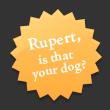
<style>
.page{position:relative;width:110px;height:110px;background:#333333}
.page>*{position:absolute;margin:0}
.t1{font:17px "AJensonPro-Bold";color:#ffffff}
.t2{font:14px/12px "AJensonPro-Bold";color:#ffffff}
</style>
<div class="page">
<p class="t1" style="left:27px;top:33px;width:54px;height:18px;rotate:-11deg">Rupert,</p>
<p class="t2" style="left:32px;top:51px;width:54px;height:31px;text-align:center;rotate:-10deg;opacity:0.89">is that <br>your dog?</p>
</div>
